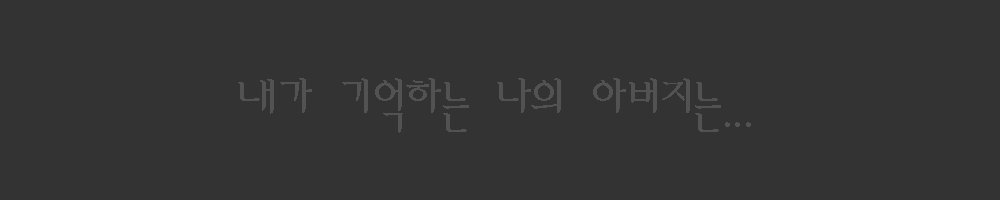
<style>
.page{position:relative;width:1000px;height:200px;background:#333333}
.page>*{position:absolute;margin:0}
.t1{font:60px "AmiR-HM";color:#525252}
</style>
<div class="page">
<p class="t1" style="left:238px;top:78px;width:513px;height:55px">내가 기억하는 나의 아버지는...</p>
</div>
